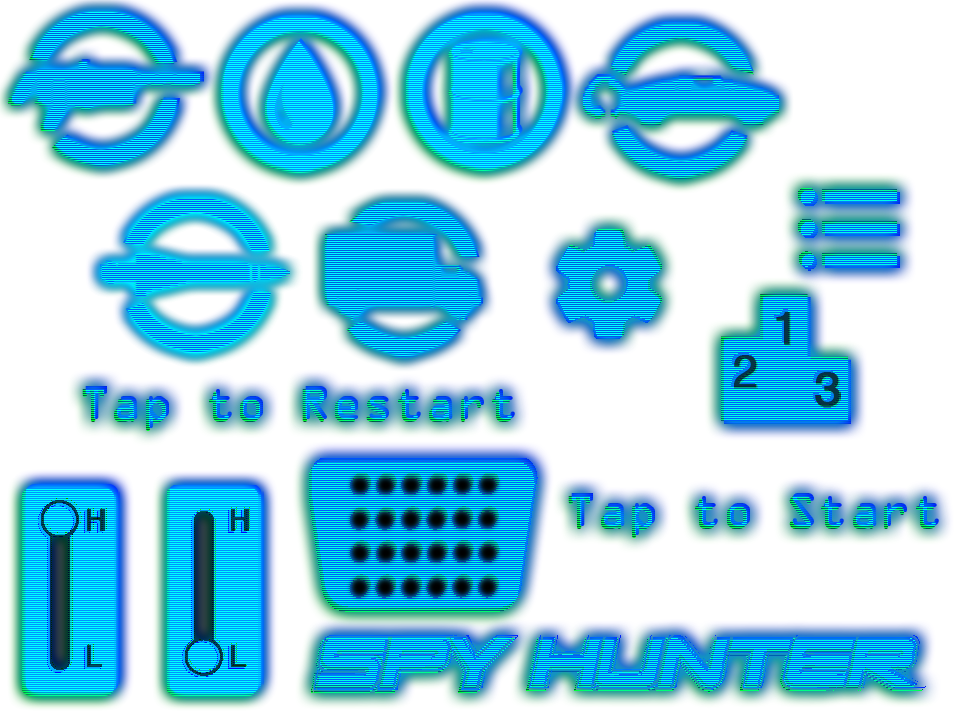
<style>
.page{position:relative;width:960px;height:720px;background:#ffffff}
.page>*{position:absolute;margin:0}
.t1{font:42.6px "OCRAStd";letter-spacing:0.02em}
</style>
<div class="page">
<p class="t1" style="left:82px;top:389px;width:430px;height:42px">Tap to Restart</p>
<p class="t1" style="left:85px;top:386px;width:430px;height:42px">Tap to Restart</p>
<p class="t1" style="left:568px;top:496px;width:368px;height:42px">Tap to Start</p>
<p class="t1" style="left:571px;top:493px;width:368px;height:42px">Tap to Start</p>
</div>
